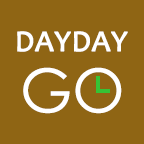
<style>
.page{position:relative;width:144px;height:144px;background:#8f6514}
.page>*{position:absolute;margin:0}
.t1{font:30px "Candara";color:#ffffff;font-weight:bold}
.t2{font:60px "CenturyGothic";color:#ffffff}
</style>
<div class="page">
<p class="t1" style="left:17px;top:31px;width:111px;height:21px">DAYDAY</p>
<p class="t2" style="left:23px;top:67px;width:99px;height:47px">GO</p>
</div>
